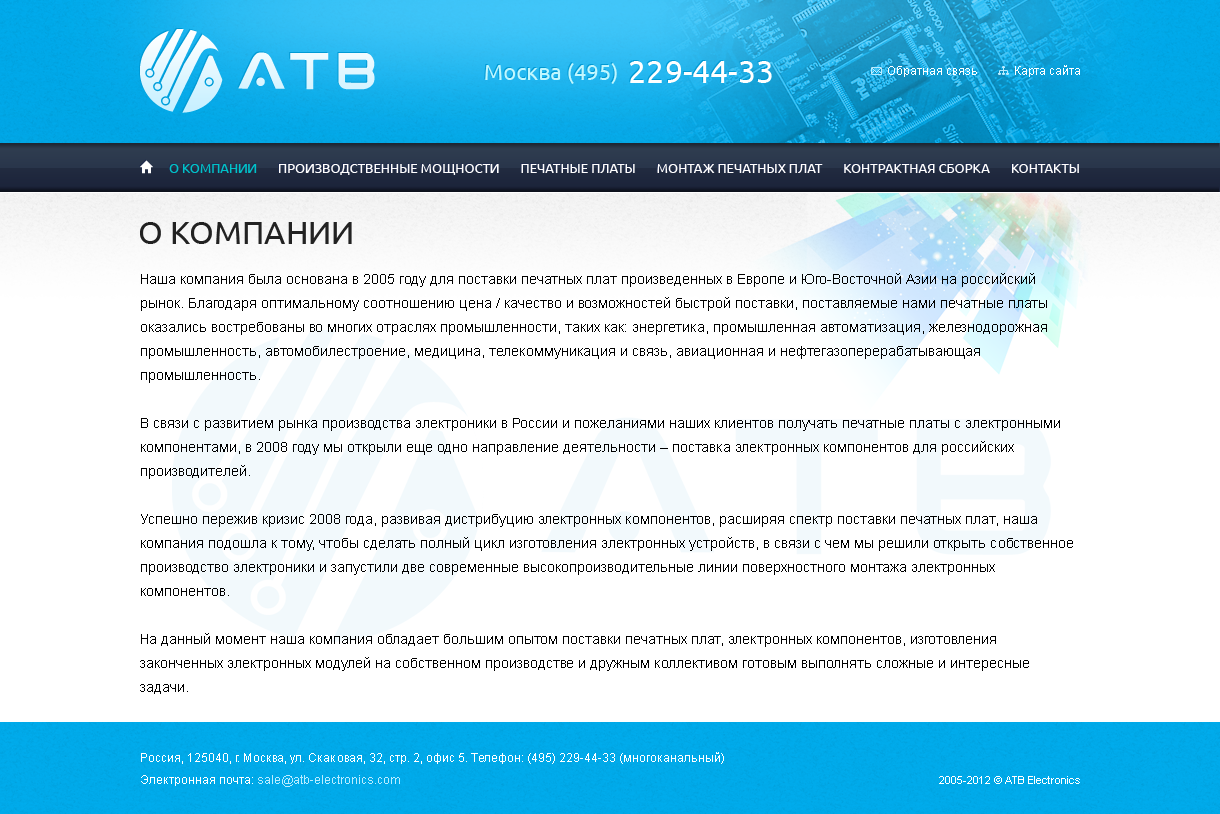
<style>
.page{position:relative;width:1220px;height:814px;background:#ffffff}
.page>*{position:absolute;margin:0}
.t1{font:22px "Ubuntu";color:#c0f7ff}
.t2{font:32px "Ubuntu";color:#ffffff}
.t3{font:12px "ArialMT";color:#ffffff}
.t4{font:13px "Ubuntu";color:#fffefe;text-transform:uppercase}
.t5{font:13px "Ubuntu";color:#00c1c8;text-transform:uppercase}
.t6{font:32px "Ubuntu";color:#222222;text-transform:uppercase}
.t7{font:14px/24px "ArialMT";color:#000000}
.t8{font:12px/22px "ArialMT";color:#ffffff}
.t9{font:12px/22px "ArialMT";color:#b9ecff}
.t10{font:11px "ArialMT";color:#ffffff}
</style>
<div class="page">
<p class="t1" style="left:485px;top:61px;width:287px;height:23px">Москва (495)  <span class="t2">229-44-33</span></p>
<p class="t3" style="left:888px;top:65px;width:192px;height:12px">Обратная связь            Карта сайта</p>
<p class="t4" style="left:169px;top:164px;width:910px;height:11px"><span class="t5">О Компании</span>       Производственные мощности       Печатные платы       Монтаж печатных плат       Контрактная сборка       Контакты</p>
<p class="t6" style="left:140px;top:222px;width:212px;height:22px">О компании</p>
<p class="t7" style="left:140px;top:273px;width:933px;height:421px">Наша компания была основана в 2005 году для поставки печатных плат произведенных в Европе и Юго-Восточной Азии на российский рынок. Благодаря оптимальному соотношению цена / качество и возможностей быстрой поставки, поставляемые нами печатные платы оказались востребованы во многих отраслях промышленности, таких как: энергетика, промышленная автоматизация, железнодорожная промышленность, автомобилестроение, медицина, телекоммуникация и связь, авиационная и нефтегазоперерабатывающая промышленность.<br><br>В связи с развитием рынка производства электроники в России и пожеланиями наших клиентов получать печатные платы с электронными компонентами, в 2008 году мы открыли еще одно направление деятельности – поставка электронных компонентов для российских производителей.<br><br>Успешно пережив кризис 2008 года, развивая дистрибуцию электронных компонентов, расширяя спектр поставки печатных плат, наша компания подошла к тому, чтобы сделать полный цикл изготовления электронных устройств, в связи с чем мы решили открыть собственное производство электроники и запустили две современные высокопроизводительные линии поверхностного монтажа электронных компонентов.<br><br>На данный момент наша компания обладает большим опытом поставки печатных плат, электронных компонентов, изготовления законченных электронных модулей на собственном производстве и дружным коллективом готовым выполнять сложные и интересные задачи.</p>
<p class="t8" style="left:141px;top:752px;width:583px;height:35px">Россия, 125040, г. Москва, ул. Скаковая, 32, стр. 2, офис 5. Телефон: (495) 229-44-33 (многоканальный)<br>Электронная почта: <span class="t9">sale@atb-electronics.com</span></p>
<p class="t10" style="left:939px;top:776px;width:141px;height:8px">2005-2012 © ATB Electronics</p>
</div>
